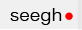
<style>
.page{position:relative;width:82px;height:30px;background:#f0f0f0}
.page>*{position:absolute;margin:0}
.t1{font:17.9px "Kalinga";color:#000000}
</style>
<div class="page">
<p class="t1" style="left:10px;top:8px;width:52px;height:17px">seegh</p>
</div>
